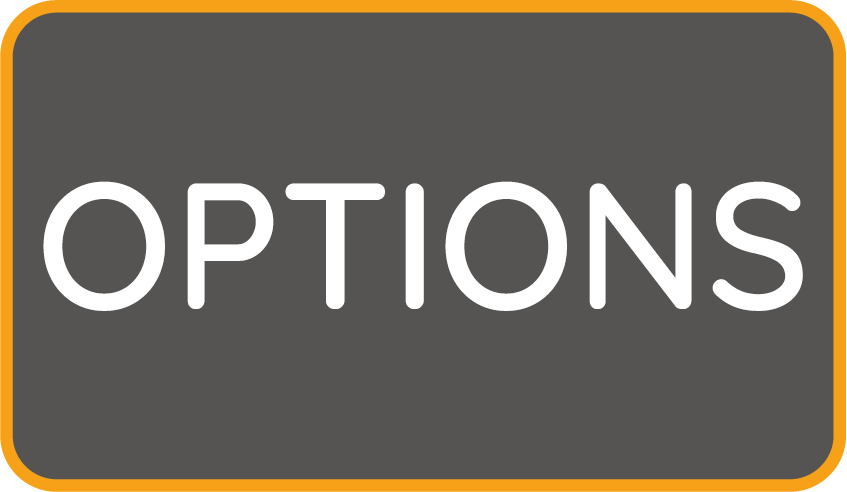
<style>
.page{position:relative;width:847px;height:492px;background:#555452}
.page>*{position:absolute;margin:0}
.t1{font:179.2px "Quicksand-Medium";color:#ffffff}
</style>
<div class="page">
<p class="t1" style="left:43px;top:181px;width:760px;height:130px">OPTIONS</p>
</div>
